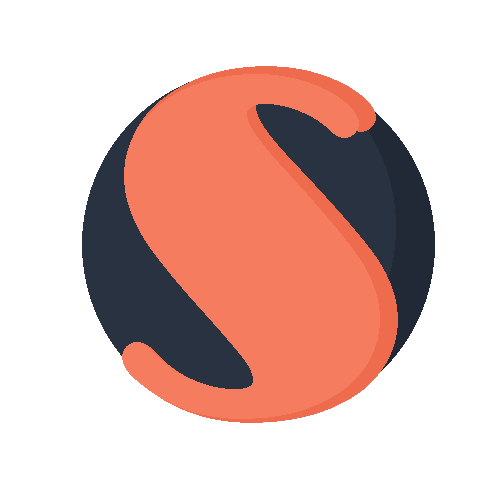
<style>
.page{position:relative;width:500px;height:500px;background:#ffffff}
.page>*{position:absolute;margin:0}
.t1{font:484.2px "Broadway";color:#ee6c4d;font-weight:bold}
</style>
<div class="page">
<p class="t1" style="left:124px;top:66px;width:274px;height:357px">S</p>
</div>
